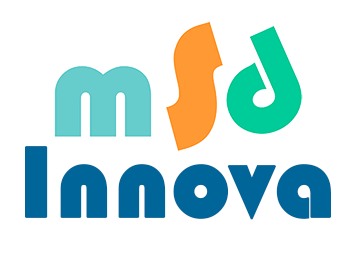
<style>
.page{position:relative;width:350px;height:263px;background:#ffffff}
.page>*{position:absolute;margin:0}
.t1{font:104.9px "Bauhaus93";color:#006699;font-weight:bold}
</style>
<div class="page">
<p class="t1" style="left:25px;top:146px;width:306px;height:74px">Innova</p>
</div>
